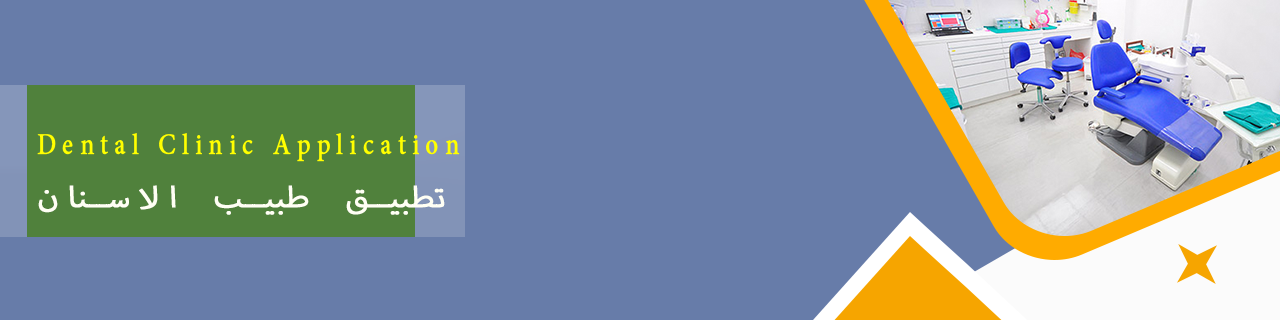
<style>
.page{position:relative;width:1280px;height:320px;background:#677ca9}
.page>*{position:absolute;margin:0}
.t1{font:41.7px "AdobeArabic-Regular";letter-spacing:0.18em;color:#ffff00;font-weight:bold;scale:0.82 1}
.t2{font:41.7px "MyriadArabic-Regular";letter-spacing:0.18em;color:#fffff4;font-weight:bold;scale:1.11 1}
</style>
<div class="page">
<p class="t1" style="left:37px;top:133px;width:423px;height:29px">Dental Clinic Application</p>
<p class="t2" style="left:38px;top:185px;width:407px;height:30px">تطبيق طبيب الاسنان</p>
</div>
